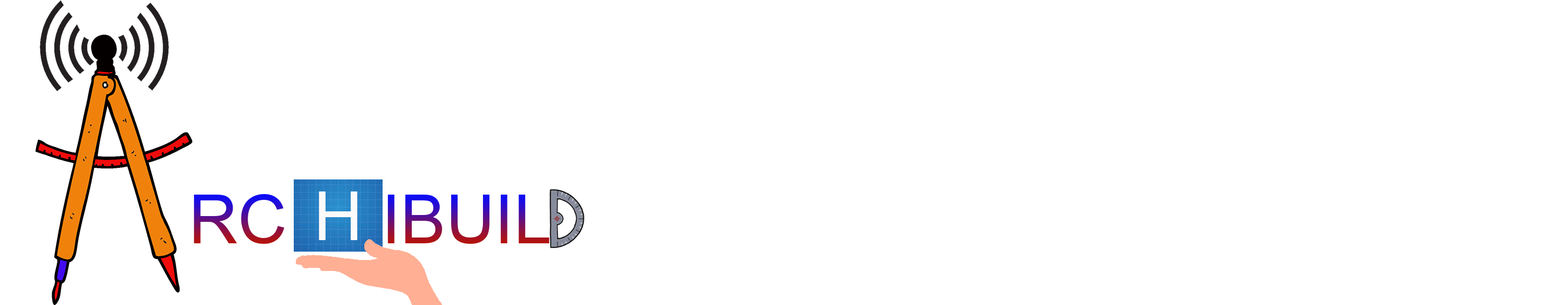
<style>
.page{position:relative;width:1568px;height:305px;background:#ffffff}
.page>*{position:absolute;margin:0}
.t1{font:67.9px "ArialMT"}
.t2{font:67.9px "ArialMT";color:#fbfafa}
</style>
<div class="page">
<p class="t1" style="left:194px;top:194px;width:355px;height:50px">RC     IBUIL</p>
<p class="t2" style="left:319px;top:191px;width:39px;height:49px">H</p>
</div>
